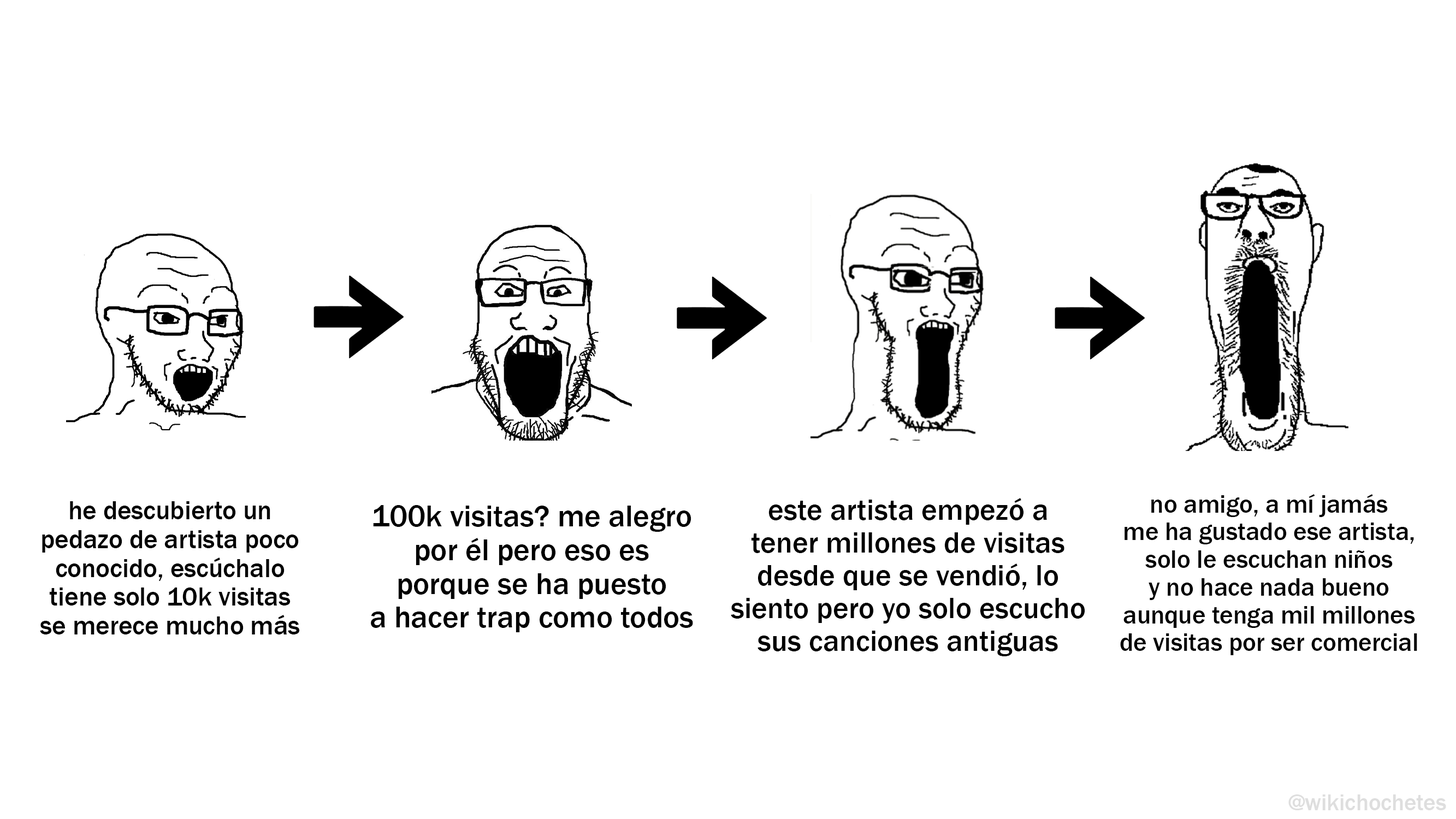
<style>
.page{position:relative;width:1456px;height:819px;background:#ffffff}
.page>*{position:absolute;margin:0}
.t1{font:25.6px "FranklinGothic-Medium";color:#000000}
.t2{font:26.6px "FranklinGothic-Medium";color:#000000}
.t3{font:31.1px "FranklinGothic-Medium";color:#000000}
.t4{font:30.2px "FranklinGothic-Medium";color:#000000}
.t5{font:23.2px "FranklinGothic-Medium";color:#dedede}
</style>
<div class="page">
<p class="t1" style="left:1120px;top:494px;width:297px;height:161px;text-align:center">no amigo, a mí jamás<br>me ha gustado ese artista,<br>solo le escuchan niños<br>y no hace nada bueno<br>aunque tenga mil millones<br>de visitas por ser comercial</p>
<p class="t2" style="left:40px;top:501px;width:260px;height:134px;text-align:center">he descubierto un<br>pedazo de artista poco<br>conocido, escúchalo<br>tiene solo 10k visitas<br>se merece mucho más</p>
<p class="t3" style="left:371px;top:505px;width:322px;height:127px;text-align:center">100k visitas? me alegro<br>por él pero eso es<br>porque se ha puesto<br>a hacer trap como todos</p>
<p class="t4" style="left:731px;top:498px;width:354px;height:158px;text-align:center">este artista empezó a<br>tener millones de visitas<br>desde que se vendió, lo<br>siento pero yo solo escucho<br>sus canciones antiguas</p>
<p class="t5" style="left:1288px;top:795px;width:158px;height:15px">@wikichochetes</p>
</div>
